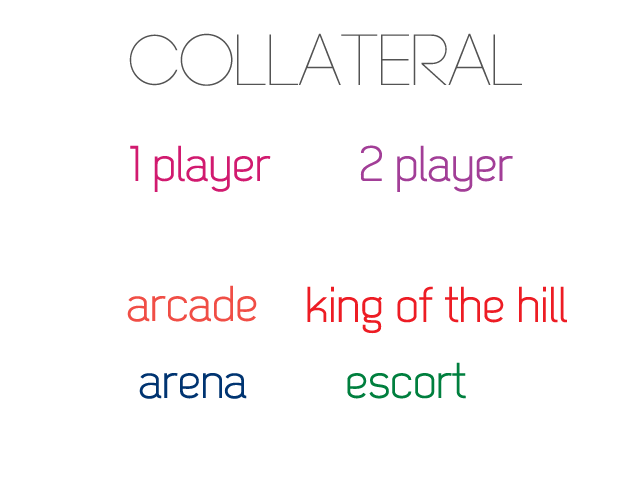
<style>
.page{position:relative;width:640px;height:480px;background:#ffffff}
.page>*{position:absolute;margin:0}
.t1{font:50px "Dekar";letter-spacing:-0.005em;color:#d11a6f}
.t2{font:50px "Dekar";letter-spacing:-0.005em;color:#a23e97}
.t3{font:50px "Dekar";letter-spacing:-0.005em;color:#f04e46}
.t4{font:50px "Dekar";letter-spacing:-0.005em;color:#ed1c24}
.t5{font:50px "Dekar";letter-spacing:-0.005em;color:#007f3e}
.t6{font:50px "Dekar";letter-spacing:-0.005em;color:#003471}
</style>
<div class="page">
<p class="t1" style="left:130px;top:145px;width:141px;height:47px">1 player</p>
<p class="t2" style="left:360px;top:145px;width:153px;height:47px">2 player</p>
<p class="t3" style="left:127px;top:285px;width:130px;height:37px">arcade</p>
<p class="t4" style="left:307px;top:286px;width:260px;height:48px">king of the hill</p>
<p class="t5" style="left:347px;top:362px;width:119px;height:37px">escort</p>
<p class="t6" style="left:139px;top:373px;width:108px;height:26px">arena</p>
</div>
